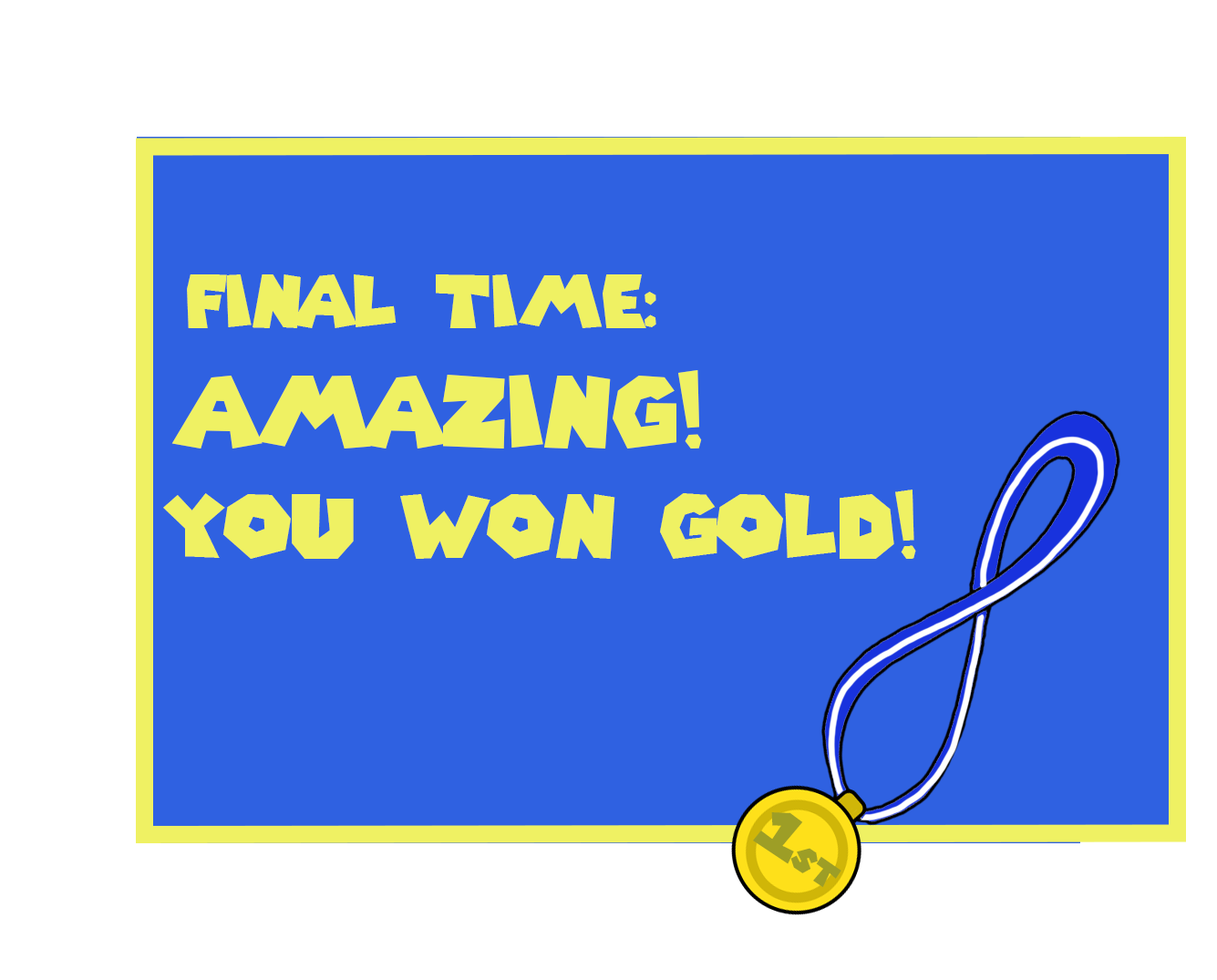
<style>
.page{position:relative;width:1217px;height:980px;background:#2f61e1}
.page>*{position:absolute;margin:0}
.t1{font:72.2px "SuperMarioGalaxy";color:#eff163}
.t2{font:98.7px "SuperMarioGalaxy";color:#eff163}
.t3{font:87.4px "SuperMarioGalaxy";color:#eff163}
.t4{font:32.9px "SuperMarioGalaxy";color:#9d9e26}
.t5{font:58.7px "SuperMarioGalaxy";color:#9d9e26}
</style>
<div class="page">
<p class="t1" style="left:187px;top:274px;width:469px;height:54px">final time:</p>
<p class="t2" style="left:171px;top:370px;width:531px;height:78px">amazing!</p>
<p class="t3" style="left:163px;top:489px;width:753px;height:70px">you won gold!</p>
<p class="t4" style="left:753px;top:812px;width:88px;height:76px;rotate:34deg"><span class="t5">1</span>st</p>
</div>
